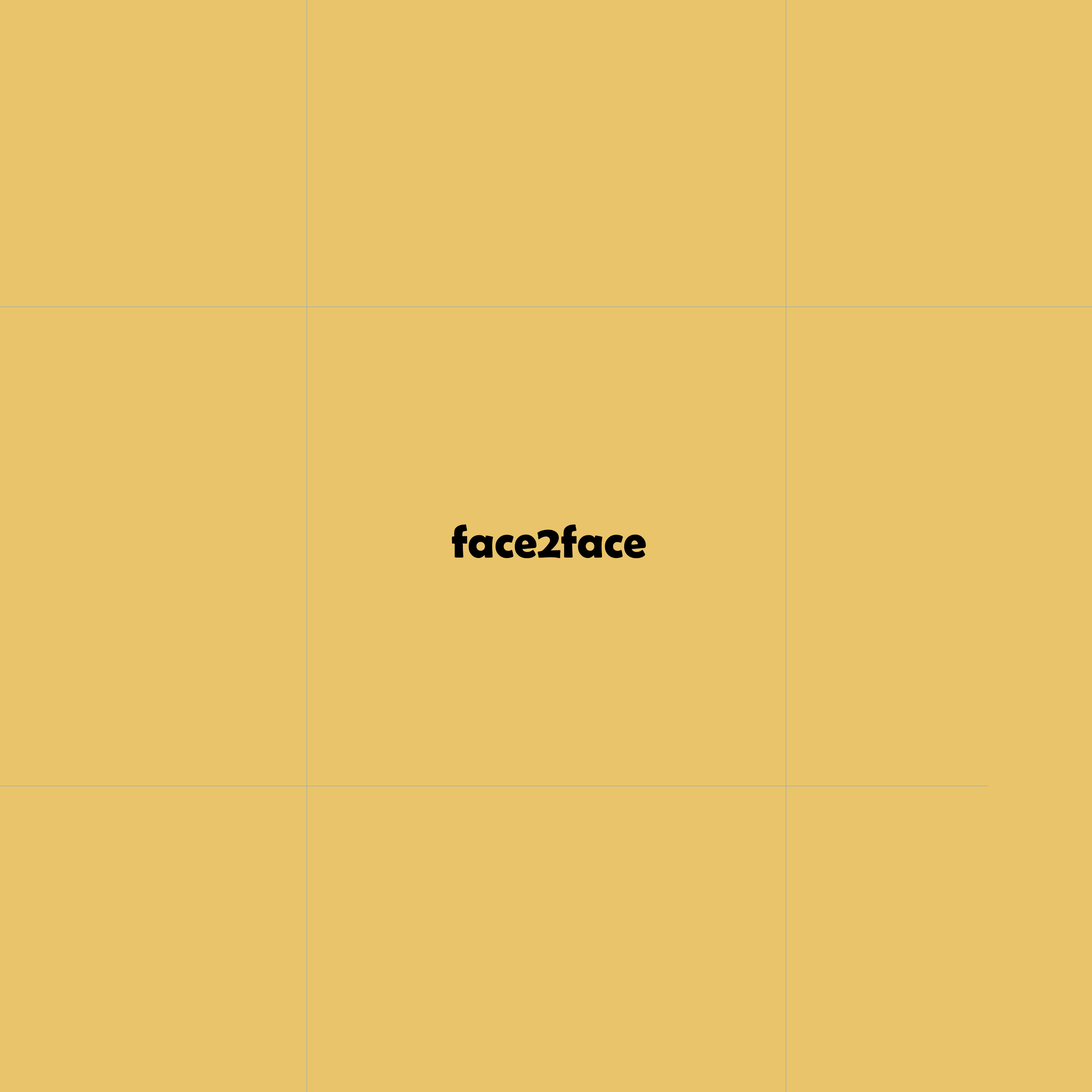
<style>
.page{position:relative;width:1092px;height:1092px;background:#e9c46a}
.page>*{position:absolute;margin:0}
.t1{font:46.1px "BerlinSansFBDemi-Bold";color:#000000}
</style>
<div class="page">
<p class="t1" style="left:452px;top:524px;width:194px;height:34px">face2face</p>
</div>
